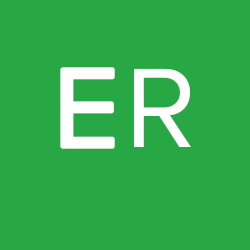
<style>
.page{position:relative;width:250px;height:250px;background:#28a745}
.page>*{position:absolute;margin:0}
.t1{font:116.7px "ProximaNova-Regular";letter-spacing:0.025em;color:#ffffff;font-weight:bold}
</style>
<div class="page">
<p class="t1" style="left:60px;top:67px;width:131px;height:82px">ER</p>
</div>
